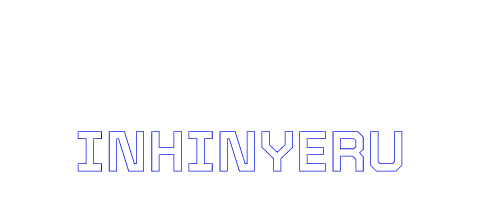
<style>
.page{position:relative;width:504px;height:216px;background:#ffffff}
.page>*{position:absolute;margin:0}
.t1{font:58px "Tourney-Thin";color:#101feb}
</style>
<div class="page">
<p class="t1" style="left:77px;top:131px;width:326px;height:41px">INHINYERU</p>
</div>
